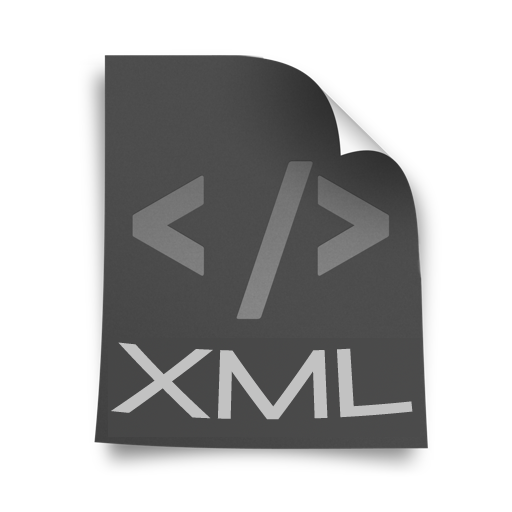
<style>
.page{position:relative;width:512px;height:512px;background:#ffffff}
.page>*{position:absolute;margin:0}
.t1{font:96px "PirulenRg-Regular";color:#c2c2c2}
</style>
<div class="page">
<p class="t1" style="left:111px;top:342px;width:302px;height:78px">XML</p>
</div>
